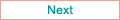
<style>
.page{position:relative;width:120px;height:20px;background:#ffffff}
.page>*{position:absolute;margin:0}
.t1{font:12px "ArialMT";letter-spacing:0.025em;color:#009999}
</style>
<div class="page">
<p class="t1" style="left:48px;top:5px;width:25px;height:10px">Next</p>
</div>
